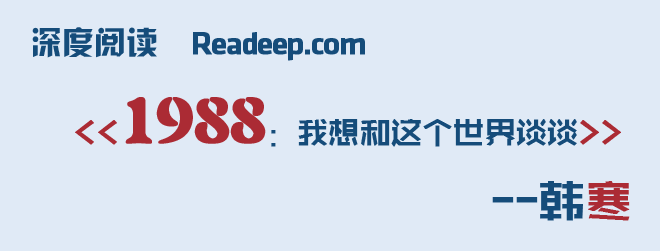
<style>
.page{position:relative;width:660px;height:251px;background:#e0eaf6}
.page>*{position:absolute;margin:0}
.t1{font:32px "HYk2gj";color:#154c7a}
.t2{font:32px "KlavikaMedium-OSF";letter-spacing:-0.05em;color:#154c7a;font-weight:bold}
.t3{font:32px "ZHSRXT--GBK1-0";letter-spacing:-0.05em;color:#154c7a;font-weight:bold}
.t4{font:32px "ZHSRXT--GBK1-0";letter-spacing:-0.05em;color:#ab2b34;font-weight:bold}
.t5{font:64px "FZJZJW--GB1-0";letter-spacing:-0.05em;color:#ab2b34;font-weight:bold}
.t6{font:48px "ZHSRXT--GBK1-0";letter-spacing:-0.05em;color:#154c7a;font-weight:bold}
.t7{font:48px "ZHSRXT--GBK1-0";letter-spacing:-0.05em;color:#ab2b34;font-weight:bold}
</style>
<div class="page">
<p class="t1" style="left:32px;top:27px;width:125px;height:31px">深度阅读</p>
<p class="t2" style="left:193px;top:32px;width:172px;height:29px">Readeep.com</p>
<p class="t3" style="left:75px;top:97px;width:546px;height:50px"><span class="t4">&lt;&lt;</span><span class="t5">1988</span>：我想和这个世界谈谈<span class="t4">&gt;&gt;</span></p>
<p class="t6" style="left:492px;top:181px;width:138px;height:40px">--韩<span class="t7">寒</span></p>
</div>
